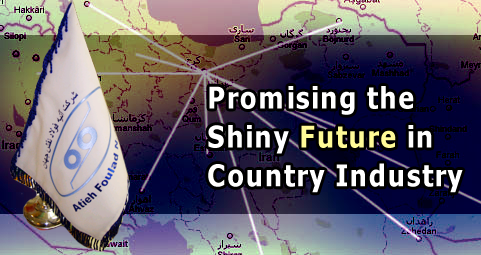
<style>
.page{position:relative;width:481px;height:255px}
.page>*{position:absolute;margin:0}
.t1{font:29.9px/38.8px "BEsfehanBold";color:#ffffff;scale:0.88 1}
.t2{font:29.9px/38.8px "BEsfehanBold";color:#fffb97;scale:0.88 1}
</style>
<div class="page">
<p class="t1" style="left:208px;top:86px;width:255px;height:107px">Promising the <br>Shiny <span class="t2">Future</span> in <br>Country Industry</p>
</div>
